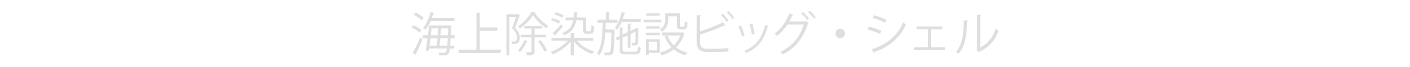
<style>
.page{position:relative;width:1410px;height:67px;background:#ffffff}
.page>*{position:absolute;margin:0}
.t1{font:46.4px "KozGoPr6N-Regular";color:#dedede}
.t2{font:46.4px "KozGoPr6N-Regular";letter-spacing:0.1em;color:#dedede}
</style>
<div class="page">
<p class="t1" style="left:411px;top:10px;width:588px;height:46px">海上除染施設ビッグ ・ <span class="t2">シェル</span></p>
</div>
